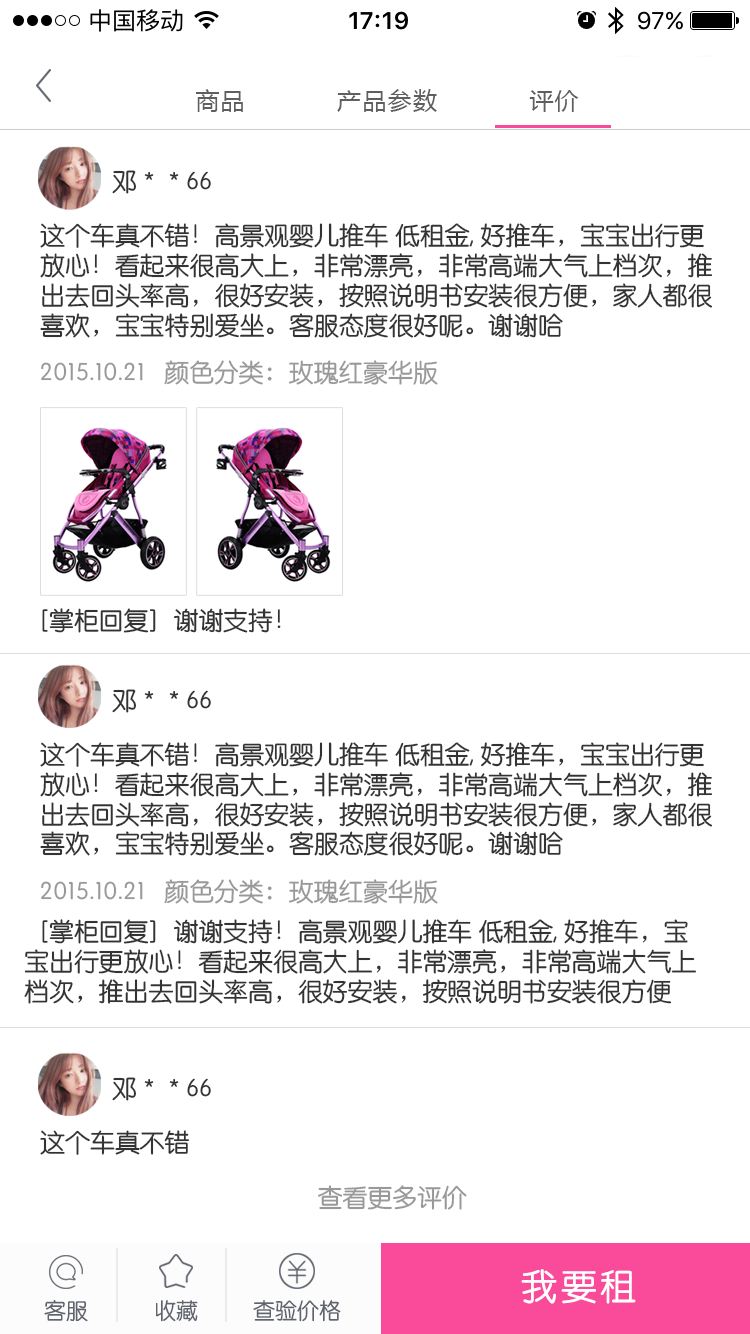
<style>
.page{position:relative;width:750px;height:1334px;background:#ffffff}
.page>*{position:absolute;margin:0}
.t1{font:24px "MicrosoftYaHei";letter-spacing:0.05em;color:#5f5f5f}
.t2{font:24.9px "STYuanti-SC-Regular";color:#333333}
.t3{font:24.9px "STYuanti-SC-Regular";color:#999999}
.t4{font:36px "STYuanti-SC-Regular";letter-spacing:0.1em;color:#ffffff}
.t5{font:22px "STYuanti-SC-Regular";color:#5f646e}
</style>
<div class="page">
<p class="t1" style="left:196px;top:89px;width:383px;height:23px">商品           产品参数           评价</p>
<p class="t2" style="left:112px;top:170px;width:99px;height:24px">邓＊＊66</p>
<p class="t2" style="left:40px;top:223px;width:673px;height:115px">这个车真不错！高景观婴儿推车 低租金, 好推车，宝宝出行更放心！看起来很高大上，非常漂亮，非常高端大气上档次，推出去回头率高，很好安装，按照说明书安装很方便，家人都很喜欢，宝宝特别爱坐。客服态度很好呢。谢谢哈</p>
<p class="t3" style="left:41px;top:360px;width:397px;height:25px">2015.10.21   颜色分类：玫瑰红豪华版</p>
<p class="t2" style="left:42px;top:608px;width:239px;height:25px">［掌柜回复］谢谢支持！</p>
<p class="t2" style="left:112px;top:689px;width:99px;height:24px">邓＊＊66</p>
<p class="t2" style="left:40px;top:742px;width:673px;height:114px">这个车真不错！高景观婴儿推车 低租金, 好推车，宝宝出行更放心！看起来很高大上，非常漂亮，非常高端大气上档次，推出去回头率高，很好安装，按照说明书安装很方便，家人都很喜欢，宝宝特别爱坐。客服态度很好呢。谢谢哈</p>
<p class="t3" style="left:41px;top:879px;width:397px;height:25px">2015.10.21   颜色分类：玫瑰红豪华版</p>
<p class="t2" style="left:24px;top:919px;width:672px;height:85px">［掌柜回复］谢谢支持！高景观婴儿推车 低租金, 好推车，宝宝出行更放心！看起来很高大上，非常漂亮，非常高端大气上档次，推出去回头率高，很好安装，按照说明书安装很方便</p>
<p class="t2" style="left:112px;top:1077px;width:99px;height:24px">邓＊＊66</p>
<p class="t2" style="left:40px;top:1130px;width:149px;height:25px">这个车真不错</p>
<p class="t3" style="left:318px;top:1185px;width:149px;height:25px">查看更多评价</p>
<p class="t4" style="left:521px;top:1269px;width:115px;height:35px">我要租</p>
<p class="t5" style="left:44px;top:1300px;width:44px;height:22px">客服</p>
<p class="t5" style="left:156px;top:1300px;width:42px;height:22px">收藏</p>
<p class="t5" style="left:253px;top:1300px;width:88px;height:22px">查验价格</p>
</div>
